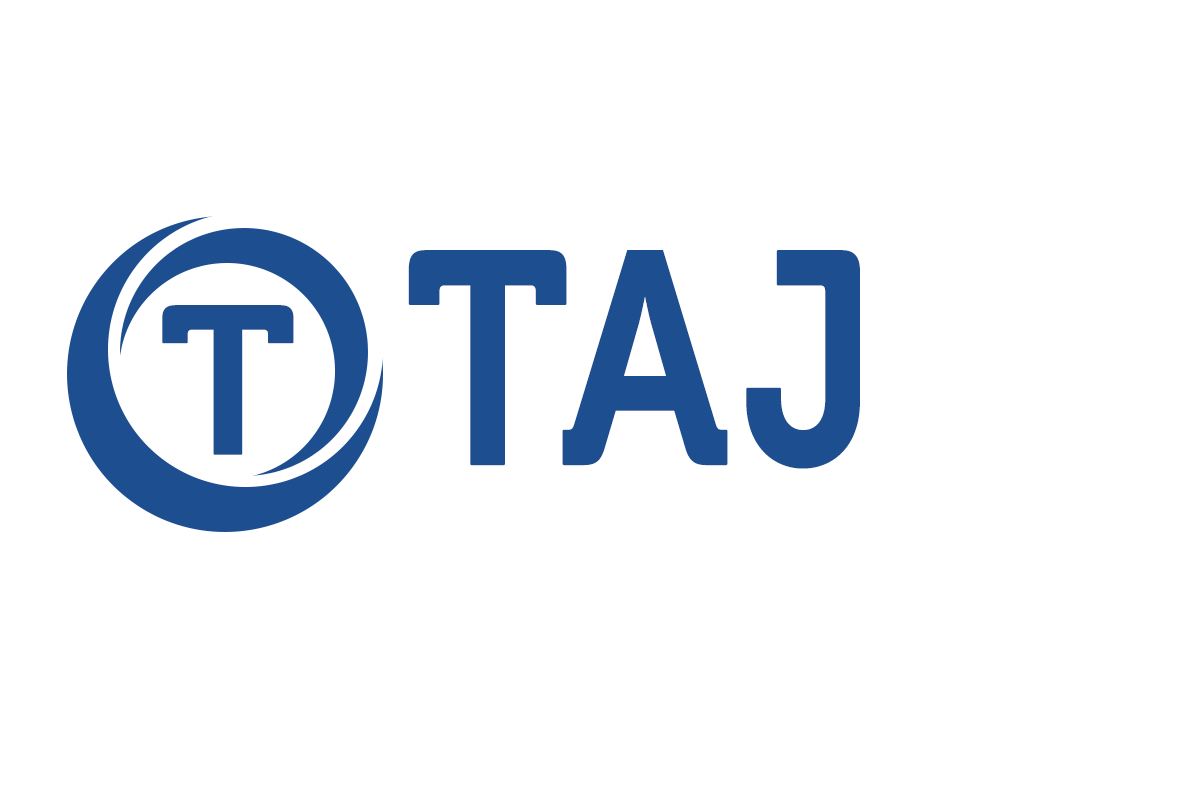
<style>
.page{position:relative;width:1200px;height:800px;background:#ffffff}
.page>*{position:absolute;margin:0}
.t1{font:300px "Museo-700";letter-spacing:0.025em;color:#1d4e90;font-weight:bold;scale:0.83 1}
.t2{font:208.3px "Museo-700";letter-spacing:0.025em;color:#1d4e90;font-weight:bold}
</style>
<div class="page">
<p class="t1" style="left:408px;top:250px;width:452px;height:219px">TAJ</p>
<p class="t2" style="left:162px;top:305px;width:132px;height:150px">T</p>
</div>
